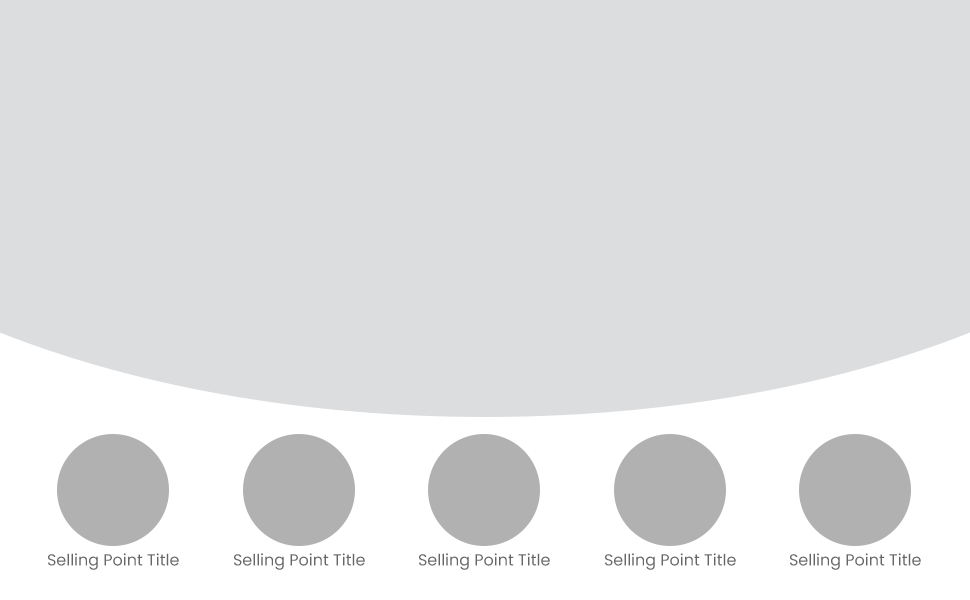
<style>
.page{position:relative;width:970px;height:600px;background:#dcdddf}
.page>*{position:absolute;margin:0}
.t1{font:16px "Poppins-Regular";color:#666666}
</style>
<div class="page">
<p class="t1" style="left:48px;top:553px;width:131px;height:17px">Selling Point Title</p>
<p class="t1" style="left:234px;top:553px;width:131px;height:17px">Selling Point Title</p>
<p class="t1" style="left:419px;top:553px;width:131px;height:17px">Selling Point Title</p>
<p class="t1" style="left:605px;top:553px;width:131px;height:17px">Selling Point Title</p>
<p class="t1" style="left:790px;top:553px;width:131px;height:17px">Selling Point Title</p>
</div>
